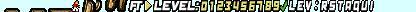
<style>
.page{position:relative;width:416px;height:12px;background:#daffff}
.page>*{position:absolute;margin:0}
.t1{font:12px "Kremlin";color:#ebe869;font-style:italic;scale:0.7 1}
.t2{font:11.4px "Kremlin";color:#ebe869;font-style:italic;scale:0.74 1}
.t3{font:12.1px "Kremlin";color:#ebe869;font-style:italic;scale:0.69 1}
.t4{font:12.6px "Kremlin";color:#ebe869;font-style:italic;scale:0.67 1}
.t5{font:12px "Kremlin";color:#ffffff;font-style:italic;scale:0.7 1}
</style>
<div class="page">
<p class="t1" style="left:201px;top:1px;width:7px;height:10px">0</p>
<p class="t1" style="left:210px;top:1px;width:4px;height:10px">1</p>
<p class="t1" style="left:217px;top:1px;width:7px;height:10px">2</p>
<p class="t1" style="left:224px;top:1px;width:8px;height:10px">3</p>
<p class="t1" style="left:233px;top:1px;width:7px;height:10px">4</p>
<p class="t2" style="left:240px;top:1px;width:7px;height:10px">5</p>
<p class="t3" style="left:248px;top:1px;width:8px;height:10px">6</p>
<p class="t4" style="left:257px;top:1px;width:6px;height:10px">7</p>
<p class="t1" style="left:265px;top:1px;width:7px;height:10px">8</p>
<p class="t1" style="left:273px;top:1px;width:7px;height:10px">9</p>
<p class="t5" style="left:289px;top:1px;width:6px;height:10px">L</p>
<p class="t5" style="left:297px;top:1px;width:7px;height:10px">E</p>
<p class="t5" style="left:306px;top:1px;width:6px;height:10px">V</p>
<p class="t5" style="left:315px;top:1px;width:3px;height:9px">:</p>
<p class="t5" style="left:321px;top:1px;width:7px;height:10px">R</p>
<p class="t5" style="left:329px;top:1px;width:7px;height:10px">S</p>
<p class="t5" style="left:338px;top:1px;width:6px;height:10px">T</p>
<p class="t5" style="left:345px;top:1px;width:7px;height:10px">A</p>
<p class="t5" style="left:353px;top:1px;width:7px;height:11px">Q</p>
<p class="t5" style="left:361px;top:1px;width:7px;height:10px">U</p>
<p class="t5" style="left:370px;top:1px;width:3px;height:10px">I</p>
</div>
